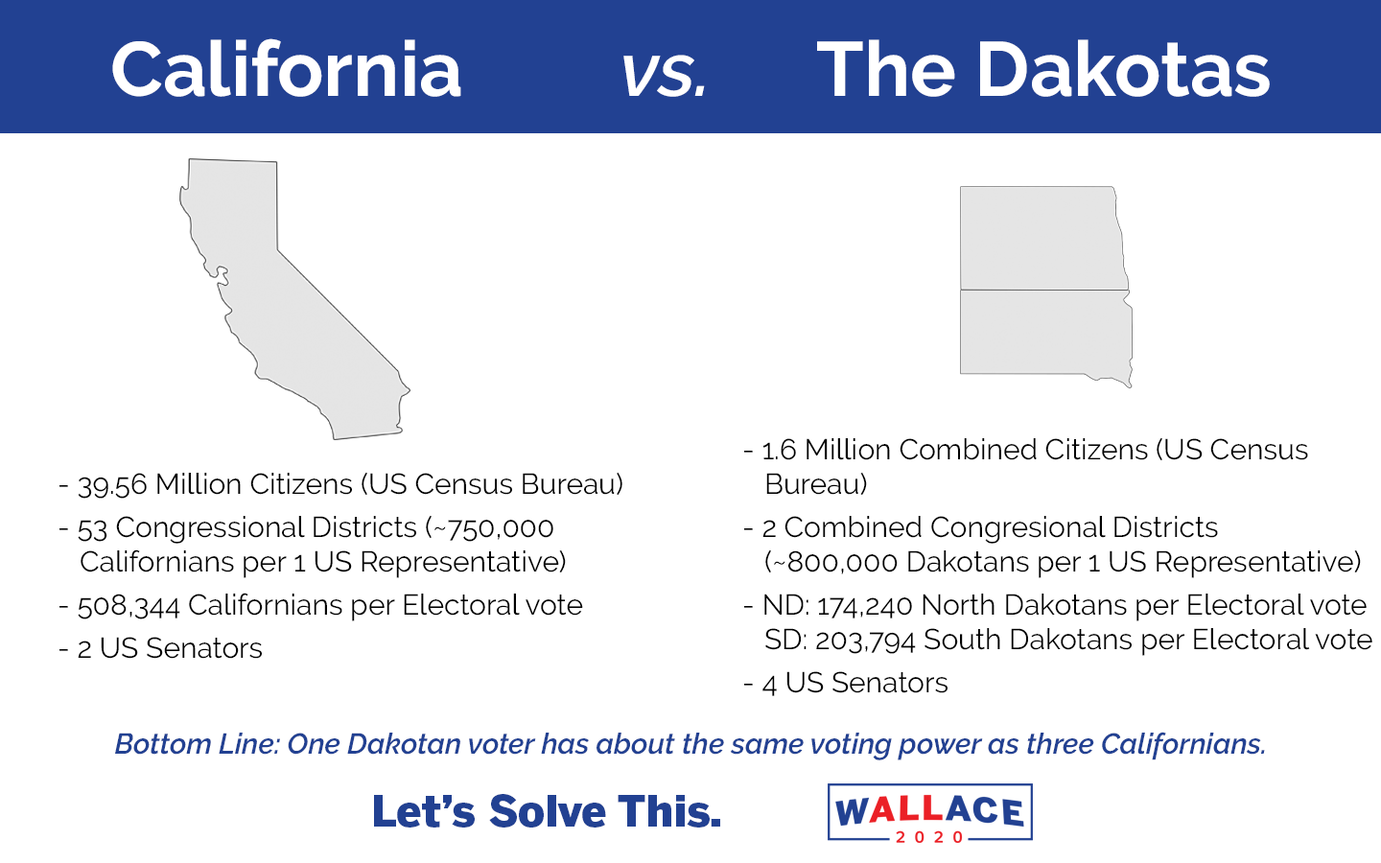
<style>
.page{position:relative;width:1381px;height:863px;background:#ffffff}
.page>*{position:absolute;margin:0}
.t1{font:76.7px "Raleway-Bold";color:#ffffff}
.t2{font:76.7px "Raleway-SemiBoldItalic";color:#ffffff}
.t3{font:28.8px "Raleway-Regular";color:#000000}
.t4{font:28.8px/43.2px "Raleway-Regular";color:#000000}
.t5{font:28.8px "Raleway-SemiBoldItalic";color:#224192}
.t6{font:43.2px "BentonSans-Black";color:#224192}
</style>
<div class="page">
<p class="t1" style="left:112px;top:38px;width:349px;height:59px">California</p>
<p class="t1" style="left:817px;top:39px;width:453px;height:58px">The Dakotas</p>
<p class="t2" style="left:623px;top:55px;width:82px;height:42px">vs.</p>
<p class="t3" style="left:744px;top:437px;width:629px;height:259px">- 1.6 Million Combined Citizens (US Census  <br>   Bureau)<br><span class="t4">- 2 Combined Congresional Districts</span> <br>   (~800,000 Dakotans per 1 US Representative)<br><span class="t4">- ND: 174,240 North Dakotans per Electoral vote<br></span>   SD: 203,794 South Dakotans per Electoral vote<br><span class="t4">- 4 US Senators</span></p>
<p class="t4" style="left:59px;top:472px;width:564px;height:187px"><span class="t3">- 39.56 Million Citizens (US Census Bureau)<br></span>- 53 Congressional Districts (~750,000<br><span class="t3">   Californians per 1 US Representative)<br></span>- 508,344 Californians per Electoral vote<br>- 2 US Senators</p>
<p class="t5" style="left:115px;top:732px;width:1150px;height:29px">Bottom Line: One Dakotan voter has about the same voting power as three Californians.</p>
<p class="t6" style="left:374px;top:794px;width:346px;height:34px">Let’s Solve This.</p>
</div>
